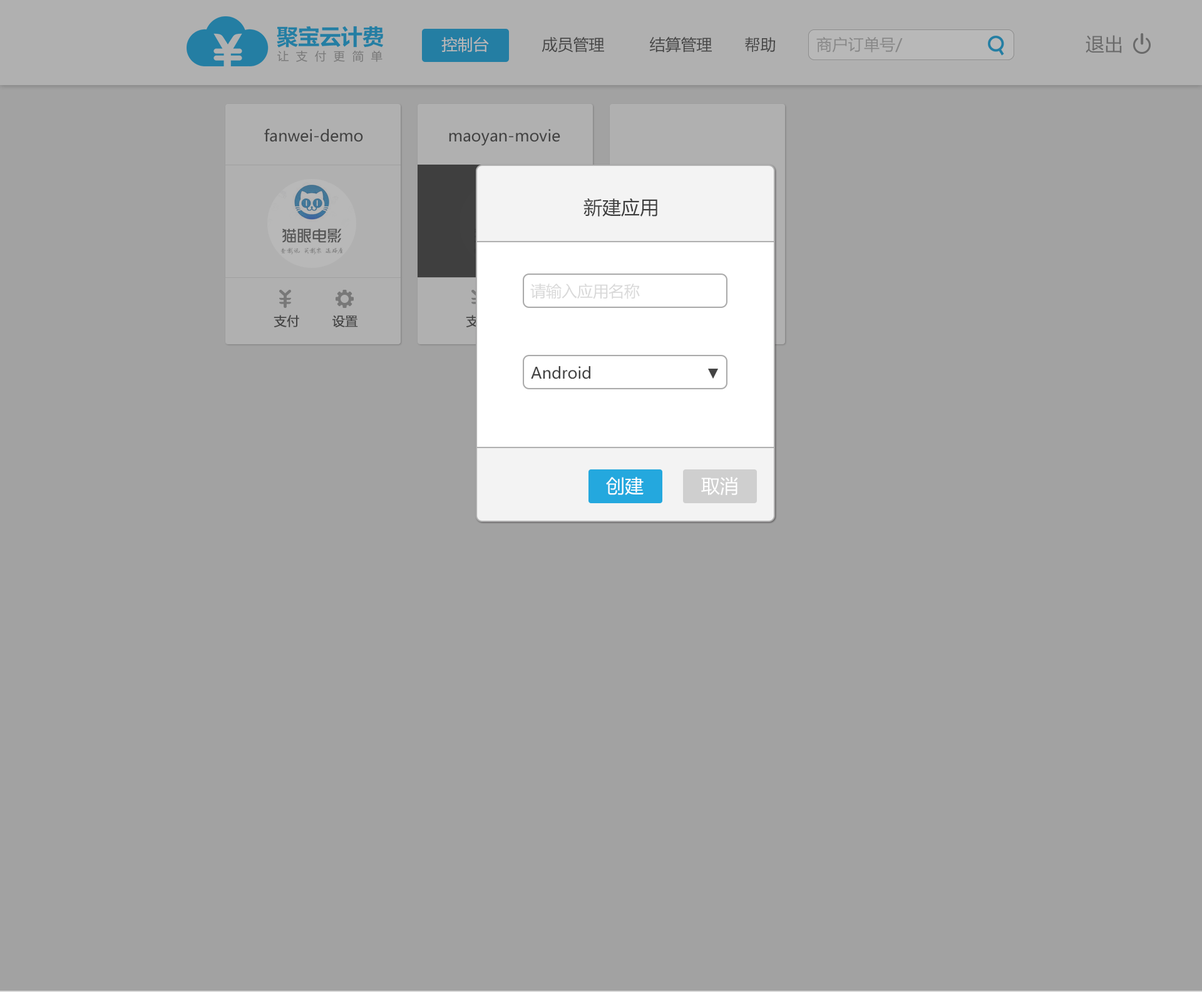
<style>
.page{position:relative;width:1202px;height:992px;background:#a2a2a2}
.page>*{position:absolute;margin:0}
.t1{font:15.6px "MicrosoftYaHei";color:#b8b8b8}
.t2{font:15.6px "MicrosoftYaHei";color:#3f3f3f}
.t3{font:15.6px "MicrosoftYaHei";color:#878787}
.t4{font:18.8px "MicrosoftYaHei";color:#7d7d7d}
.t5{font:15.6px "MicrosoftYaHei";color:#3a3a3a}
.t6{font:18.8px "MicrosoftYaHei";color:#3f3f3f}
.t7{font:15.6px "MicrosoftYaHei";color:#d9d9d9}
.t8{font:12.5px "MicrosoftYaHei";color:#3f3f3f;font-weight:bold}
.t9{font:12.5px "MicrosoftYaHei";font-weight:bold}
.t10{font:15.6px "MicrosoftYaHei";color:#434343}
.t11{font:18.8px "MicrosoftYaHei";color:#ffffff}
</style>
<div class="page">
<p class="t1" style="left:441px;top:37px;width:48px;height:16px">控制台</p>
<p class="t2" style="left:541px;top:37px;width:63px;height:16px">成员管理</p>
<p class="t2" style="left:649px;top:37px;width:63px;height:16px">结算管理</p>
<p class="t2" style="left:745px;top:37px;width:30px;height:15px">帮助</p>
<p class="t3" style="left:816px;top:37px;width:87px;height:16px">商户订单号/ 聚宝订单号/ 付款方名称</p>
<p class="t4" style="left:1085px;top:35px;width:37px;height:18px">退出</p>
<p class="t5" style="left:264px;top:128px;width:99px;height:14px">fanwei-demo</p>
<p class="t5" style="left:449px;top:129px;width:111px;height:17px">maoyan-movie</p>
<p class="t6" style="left:583px;top:198px;width:74px;height:19px">新建应用</p>
<p class="t7" style="left:530px;top:284px;width:110px;height:15px">请输入应用名称</p>
<p class="t8" style="left:274px;top:315px;width:25px;height:12px">支付</p>
<p class="t8" style="left:332px;top:315px;width:26px;height:12px">设置</p>
<p class="t9" style="left:466px;top:315px;width:25px;height:12px">支付</p>
<p class="t10" style="left:531px;top:366px;width:59px;height:13px">Android</p>
<p class="t11" style="left:606px;top:477px;width:37px;height:18px">创建</p>
<p class="t11" style="left:701px;top:477px;width:37px;height:18px">取消</p>
</div>
